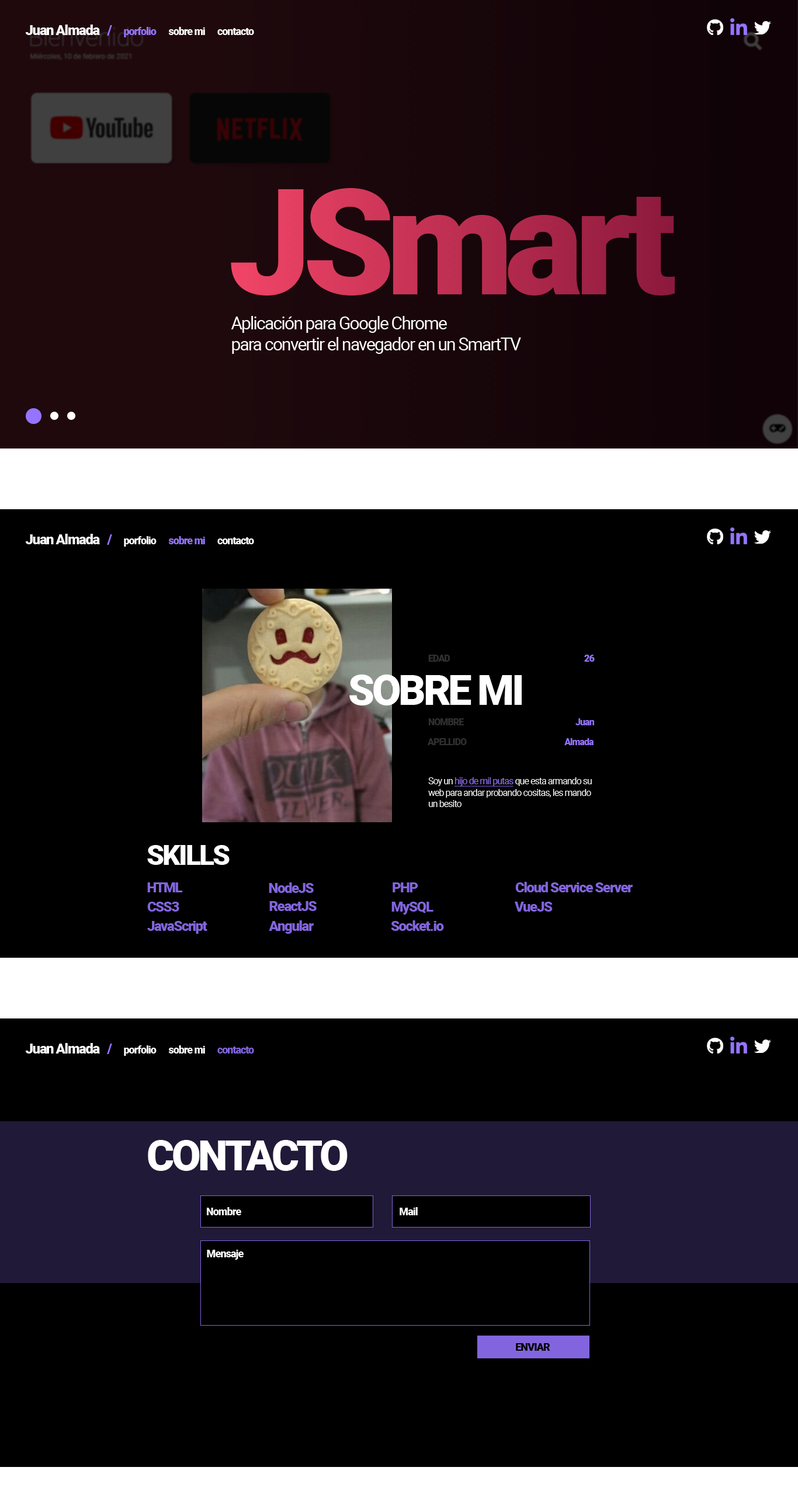
<style>
.page{position:relative;width:798px;height:1495px;background:#000000}
.page>*{position:absolute;margin:0}
.t1{font:14px "Roboto-Black";letter-spacing:-0.06em;color:#ffffff}
.t2{font:14px "Roboto-Black";letter-spacing:-0.06em;color:#9574ff}
.t3{font:10.5px "Roboto-Black";letter-spacing:-0.06em;color:#9574ff}
.t4{font:10.5px "Roboto-Black";letter-spacing:-0.06em;color:#ffffff}
.t5{font:148px "Roboto-Black";letter-spacing:-0.06em}
.t6{font:17.5px "Roboto-Regular";letter-spacing:-0.06em;color:#ffffff}
.t7{font:9.3px "Roboto-Black";letter-spacing:-0.06em;color:#303030}
.t8{font:9.3px "Roboto-Black";letter-spacing:-0.06em;color:#9574ff}
.t9{font:42px "Roboto-Black";letter-spacing:-0.06em;color:#ffffff}
.t10{font:9.3px "Roboto-Regular";letter-spacing:-0.06em;color:#ffffff}
.t11{font:9.3px "Roboto-Regular";letter-spacing:-0.06em;color:#9574ff;text-decoration:underline}
.t12{font:28px "Roboto-Black";letter-spacing:-0.06em;color:#ffffff}
.t13{font:14px "Roboto-Black";letter-spacing:-0.06em;color:#8265de}
.t14{font:10.5px "Roboto-Black";letter-spacing:-0.06em;color:#8265de}
.t15{font:10.7px "Roboto-Black";letter-spacing:-0.06em;color:#ffffff}
.t16{font:10.7px "Roboto-Black";letter-spacing:-0.06em;color:#000000}
</style>
<div class="page">
<p class="t1" style="left:25px;top:25px;width:87px;height:11px">Juan Almada   <span class="t2">/</span></p>
<p class="t3" style="left:124px;top:27px;width:32px;height:10px">porfolio</p>
<p class="t4" style="left:168px;top:27px;width:37px;height:8px">sobre mi</p>
<p class="t4" style="left:217px;top:28px;width:37px;height:7px">contacto</p>
<p class="t5" style="left:231px;top:188px;width:443px;height:107px">JSmart</p>
<p class="t6" style="left:231px;top:316px;width:290px;height:38px">Aplicación para Google Chrome<br>para convertir el navegador en un SmartTV</p>
<p class="t1" style="left:25px;top:534px;width:87px;height:11px">Juan Almada   <span class="t2">/</span></p>
<p class="t4" style="left:124px;top:536px;width:32px;height:11px">porfolio</p>
<p class="t3" style="left:168px;top:536px;width:37px;height:8px">sobre mi</p>
<p class="t4" style="left:217px;top:537px;width:37px;height:7px">contacto</p>
<p class="t7" style="left:428px;top:655px;width:166px;height:7px">EDAD            <span class="t8">26</span></p>
<p class="t9" style="left:349px;top:674px;width:172px;height:31px">SOBRE MI</p>
<p class="t7" style="left:428px;top:718px;width:166px;height:7px">NOMBRE             <span class="t8">Juan</span></p>
<p class="t7" style="left:427px;top:738px;width:167px;height:7px">APELLIDO            <span class="t8">Almada</span></p>
<p class="t10" style="left:428px;top:777px;width:164px;height:30px">Soy un <span class="t11">hijo de mil putas</span> que esta armando su <br>web para andar probando cositas, les mando <br>un besito</p>
<p class="t12" style="left:147px;top:845px;width:82px;height:20px">SKILLS</p>
<p class="t13" style="left:515px;top:882px;width:117px;height:10px">Cloud Service Server</p>
<p class="t13" style="left:147px;top:882px;width:36px;height:10px">HTML</p>
<p class="t13" style="left:269px;top:882px;width:45px;height:11px">NodeJS</p>
<p class="t13" style="left:392px;top:882px;width:26px;height:10px">PHP</p>
<p class="t13" style="left:147px;top:902px;width:32px;height:10px">CSS3</p>
<p class="t13" style="left:269px;top:901px;width:47px;height:10px">ReactJS</p>
<p class="t13" style="left:391px;top:902px;width:42px;height:12px">MySQL</p>
<p class="t13" style="left:514px;top:902px;width:38px;height:10px">VueJS</p>
<p class="t13" style="left:147px;top:921px;width:60px;height:13px">JavaScript</p>
<p class="t13" style="left:269px;top:920px;width:45px;height:14px">Angular</p>
<p class="t13" style="left:391px;top:920px;width:53px;height:11px">Socket.io</p>
<p class="t1" style="left:25px;top:1043px;width:87px;height:11px">Juan Almada   <span class="t2">/</span></p>
<p class="t4" style="left:124px;top:1045px;width:32px;height:11px">porfolio</p>
<p class="t4" style="left:168px;top:1045px;width:37px;height:8px">sobre mi</p>
<p class="t14" style="left:217px;top:1046px;width:37px;height:7px">contacto</p>
<p class="t9" style="left:148px;top:1140px;width:199px;height:31px">CONTACTO</p>
<p class="t15" style="left:207px;top:1207px;width:34px;height:8px">Nombre</p>
<p class="t15" style="left:399px;top:1207px;width:19px;height:8px">Mail</p>
<p class="t15" style="left:207px;top:1250px;width:37px;height:10px">Mensaje</p>
<p class="t16" style="left:516px;top:1343px;width:34px;height:8px">ENVIAR</p>
</div>
